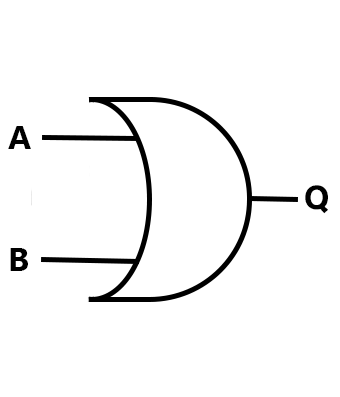
<style>
.page{position:relative;width:340px;height:397px;background:#ffffff}
.page>*{position:absolute;margin:0}
.t1{font:33.3px "SegoeUIVariable-BoldText";color:#000000}
</style>
<div class="page">
<p class="t1" style="left:8px;top:126px;width:23px;height:23px">A</p>
<p class="t1" style="left:305px;top:185px;width:23px;height:29px">Q</p>
<p class="t1" style="left:10px;top:248px;width:18px;height:23px">B</p>
</div>
